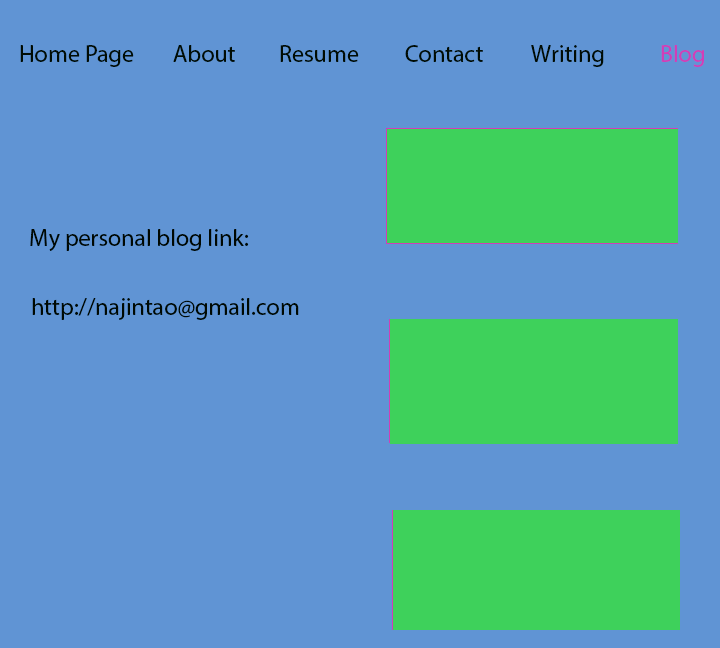
<style>
.page{position:relative;width:720px;height:648px;background:#6094d4}
.page>*{position:absolute;margin:0}
.t1{font:24px "MyriadPro-Regular";color:#010c03}
.t2{font:24px "MyriadPro-Regular";color:#d13eb7}
.t3{font:24px "MyriadPro-Regular";color:#000802}
.t4{font:24px "MyriadPro-Regular";color:#000902}
</style>
<div class="page">
<p class="t1" style="left:20px;top:45px;width:114px;height:22px">Home Page</p>
<p class="t1" style="left:173px;top:45px;width:62px;height:17px">About</p>
<p class="t1" style="left:280px;top:45px;width:79px;height:17px">Resume</p>
<p class="t1" style="left:405px;top:45px;width:78px;height:17px">Contact</p>
<p class="t1" style="left:531px;top:45px;width:73px;height:22px">Writing</p>
<p class="t2" style="left:661px;top:45px;width:43px;height:22px">Blog</p>
<p class="t3" style="left:30px;top:229px;width:219px;height:22px">My personal blog link:</p>
<p class="t4" style="left:32px;top:298px;width:267px;height:22px">http://najintao@gmail.com</p>
</div>
